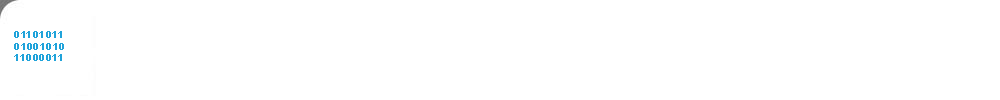
<style>
.page{position:relative;width:1000px;height:100px;background:#ffffff}
.page>*{position:absolute;margin:0}
.t1{font:10.1px/11.6px "Arial-BoldMT";color:#20a3da;scale:1.07 1}
</style>
<div class="page">
<p class="t1" style="left:14px;top:31px;width:50px;height:30px">01101011<br>01001010<br>11000011</p>
</div>
